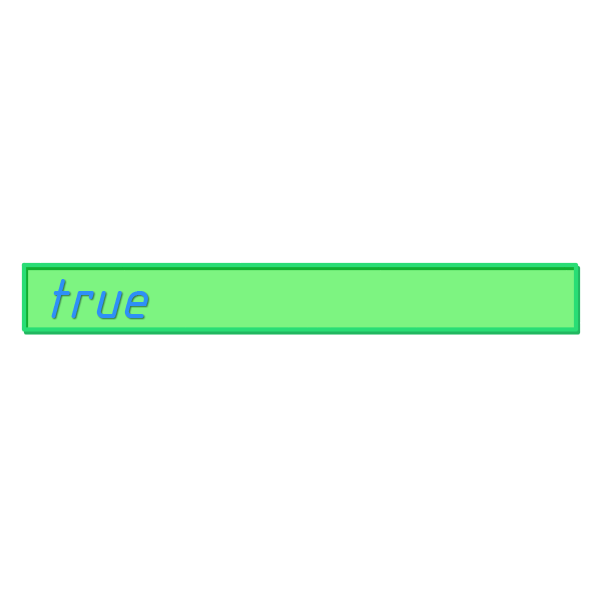
<style>
.page{position:relative;width:600px;height:600px;background:#ffffff}
.page>*{position:absolute;margin:0}
.t1{font:60.4px "ISOCPEURItalic";color:#2e90f7}
.t2{font:60.4px "Tahoma";color:#2e90f7}
</style>
<div class="page">
<p class="t1" style="left:51px;top:279px;width:97px;height:39px"><span class="t2"> </span>true</p>
</div>
